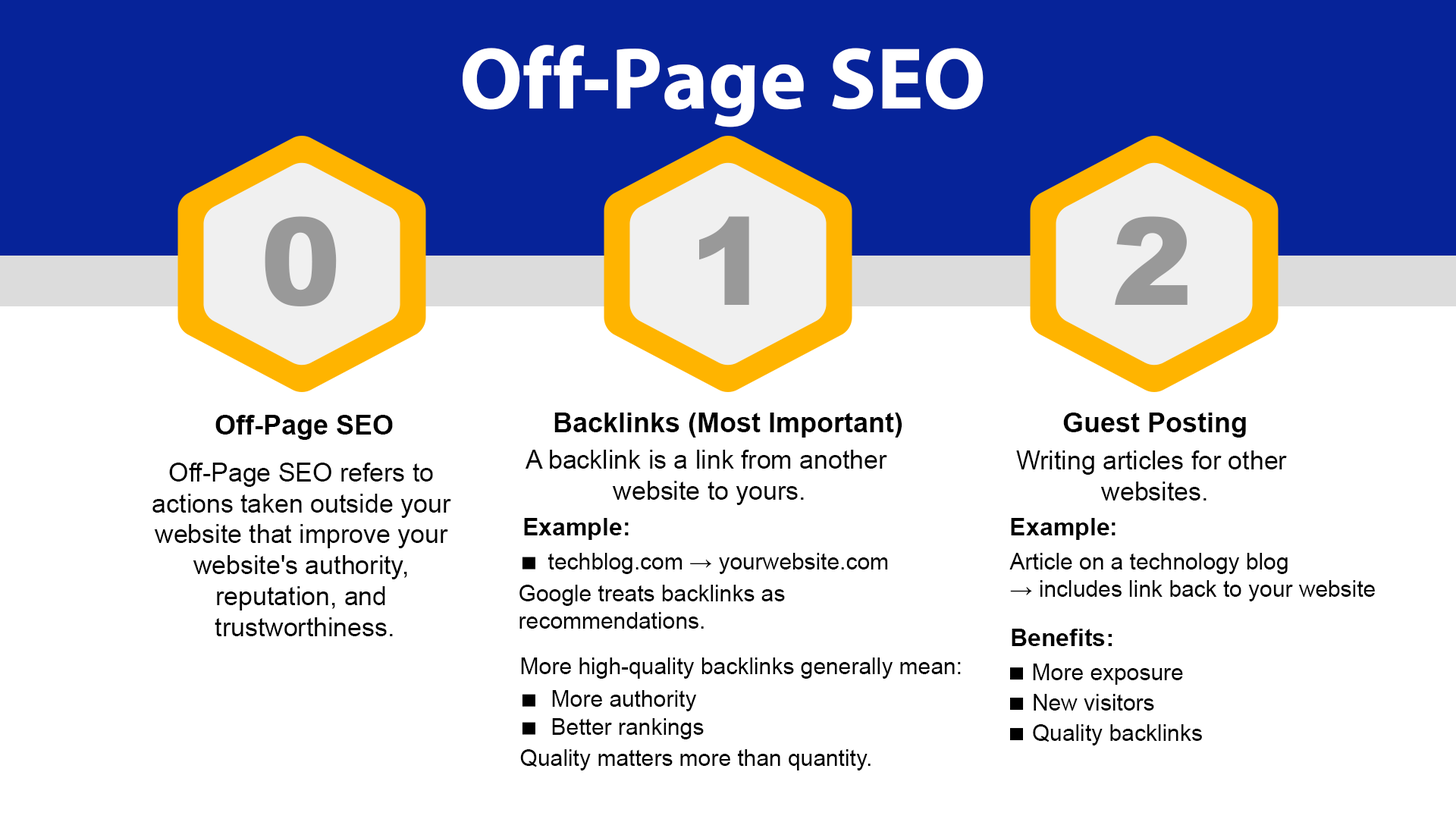
<style>
.page{position:relative;width:1456px;height:819px;background:#ffffff}
.page>*{position:absolute;margin:0}
.t1{font:88px "iKampuchea001_O'Chrov";color:#ffffff}
.t2{font:121px "Arial-Black";color:#999999}
.t3{font:27.3px "Arial-BoldMT";color:#000000}
.t4{font:25.8px "ArialMT";color:#000000}
.t5{font:24.2px "Arial-BoldMT";color:#000000}
.t6{font:22.7px "ArialMT";color:#000000}
.t7{font:23.8px "Arial-BoldMT";color:#000000}
.t8{font:22.8px "ArialMT";color:#000000}
</style>
<div class="page">
<p class="t1" style="left:463px;top:45px;width:521px;height:82px">Off-Page SEO</p>
<p class="t2" style="left:265px;top:216px;width:72px;height:90px">0</p>
<p class="t2" style="left:699px;top:216px;width:50px;height:89px">1</p>
<p class="t2" style="left:1115px;top:216px;width:73px;height:89px">2</p>
<p class="t3" style="left:554px;top:413px;width:348px;height:25px">Backlinks (Most Important)</p>
<p class="t3" style="left:1063px;top:413px;width:183px;height:25px">Guest Posting</p>
<p class="t3" style="left:215px;top:415px;width:178px;height:25px">Off-Page SEO</p>
<p class="t4" style="left:525px;top:450px;width:362px;height:55px;text-align:center">A backlink is a link from another <br>website to yours.</p>
<p class="t4" style="left:1016px;top:450px;width:271px;height:50px;text-align:center">Writing articles for other <br>websites.</p>
<p class="t4" style="left:152px;top:463px;width:299px;height:173px;text-align:center">Off-Page SEO refers to <br>actions taken outside your <br>website that improve your <br>website's authority, <br>reputation, and <br>trustworthiness.</p>
<p class="t5" style="left:524px;top:518px;width:105px;height:22px">Example:</p>
<p class="t5" style="left:1011px;top:518px;width:104px;height:22px">Example:</p>
<p class="t6" style="left:548px;top:553px;width:340px;height:21px">techblog.com → yourwebsite.com</p>
<p class="t6" style="left:1009px;top:553px;width:366px;height:48px">Article on a technology blog<br>→ includes link back to your website</p>
<p class="t6" style="left:519px;top:585px;width:266px;height:44px">Google treats backlinks as <br>recommendations.</p>
<p class="t5" style="left:1012px;top:629px;width:100px;height:17px">Benefits<span class="t7">:</span></p>
<p class="t6" style="left:521px;top:657px;width:440px;height:22px">More high-quality backlinks generally mean:</p>
<p class="t6" style="left:1033px;top:664px;width:150px;height:21px">More exposure</p>
<p class="t6" style="left:552px;top:690px;width:145px;height:21px">More authority</p>
<p class="t8" style="left:1034px;top:694px;width:120px;height:17px">New visitors</p>
<p class="t6" style="left:552px;top:718px;width:152px;height:21px">Better rankings</p>
<p class="t8" style="left:1033px;top:724px;width:169px;height:21px">Quality backlinks</p>
<p class="t6" style="left:520px;top:749px;width:351px;height:21px">Quality matters more than quantity.</p>
</div>
